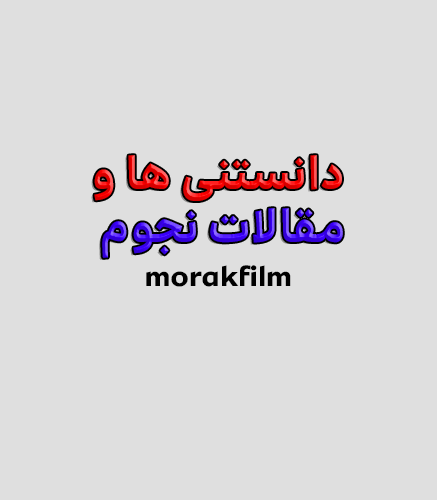
<style>
.page{position:relative;width:437px;height:500px;background:#dfdfdf}
.page>*{position:absolute;margin:0}
.t1{font:44px "Irancell-Bold"}
.t2{font:29px "Irancell-Bold";color:#000000}
</style>
<div class="page">
<p class="t1" style="left:94px;top:155px;width:249px;height:103px;text-align:center">دانستنی ها و<br> مقالات نجوم</p>
<p class="t2" style="left:146px;top:265px;width:145px;height:22px">morakfilm</p>
</div>
